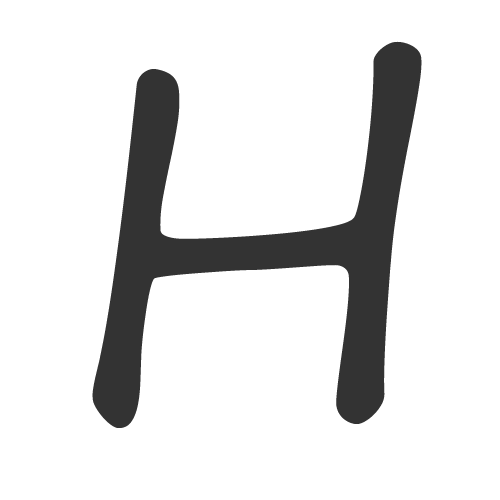
<style>
.page{position:relative;width:500px;height:500px;background:#ffffff}
.page>*{position:absolute;margin:0}
.t1{font:466.7px "SegoeScript";color:#333333}
</style>
<div class="page">
<p class="t1" style="left:92px;top:41px;width:330px;height:387px">H</p>
</div>
